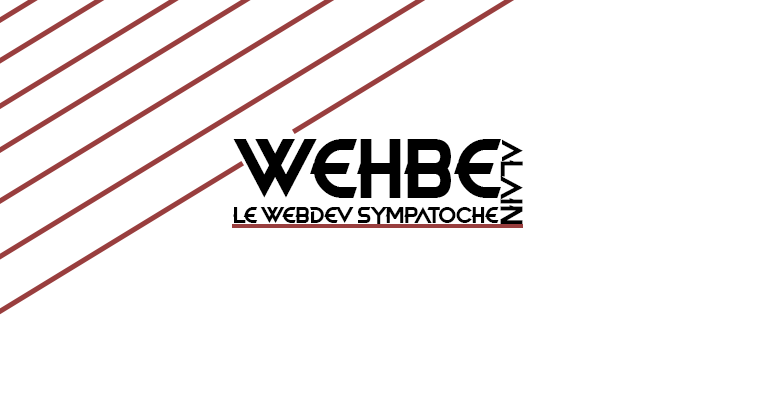
<style>
.page{position:relative;width:758px;height:396px;background:#ffffff}
.page>*{position:absolute;margin:0}
.t1{font:73.8px "DeadRevolution";color:#000000}
.t2{font:28.3px "DeadRevolution";color:#000000}
.t3{font:20.2px "DeadRevolution";color:#000000;scale:1.04 1}
</style>
<div class="page">
<p class="t1" style="left:233px;top:139px;width:268px;height:59px">WEHBE</p>
<p class="t2" style="left:500px;top:139px;width:23px;height:86px;rotate:90deg">aLAIN</p>
<p class="t3" style="left:233px;top:207px;width:266px;height:18px">LE WEBDEV SYMPATOCHE</p>
</div>
